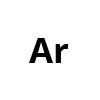
<style>
.page{position:relative;width:100px;height:100px;background:#ffffff}
.page>*{position:absolute;margin:0}
.t1{font:35px "OpenSans-Bold";color:#000000}
</style>
<div class="page">
<p class="t1" style="left:29px;top:38px;width:40px;height:25px">Ar</p>
</div>
